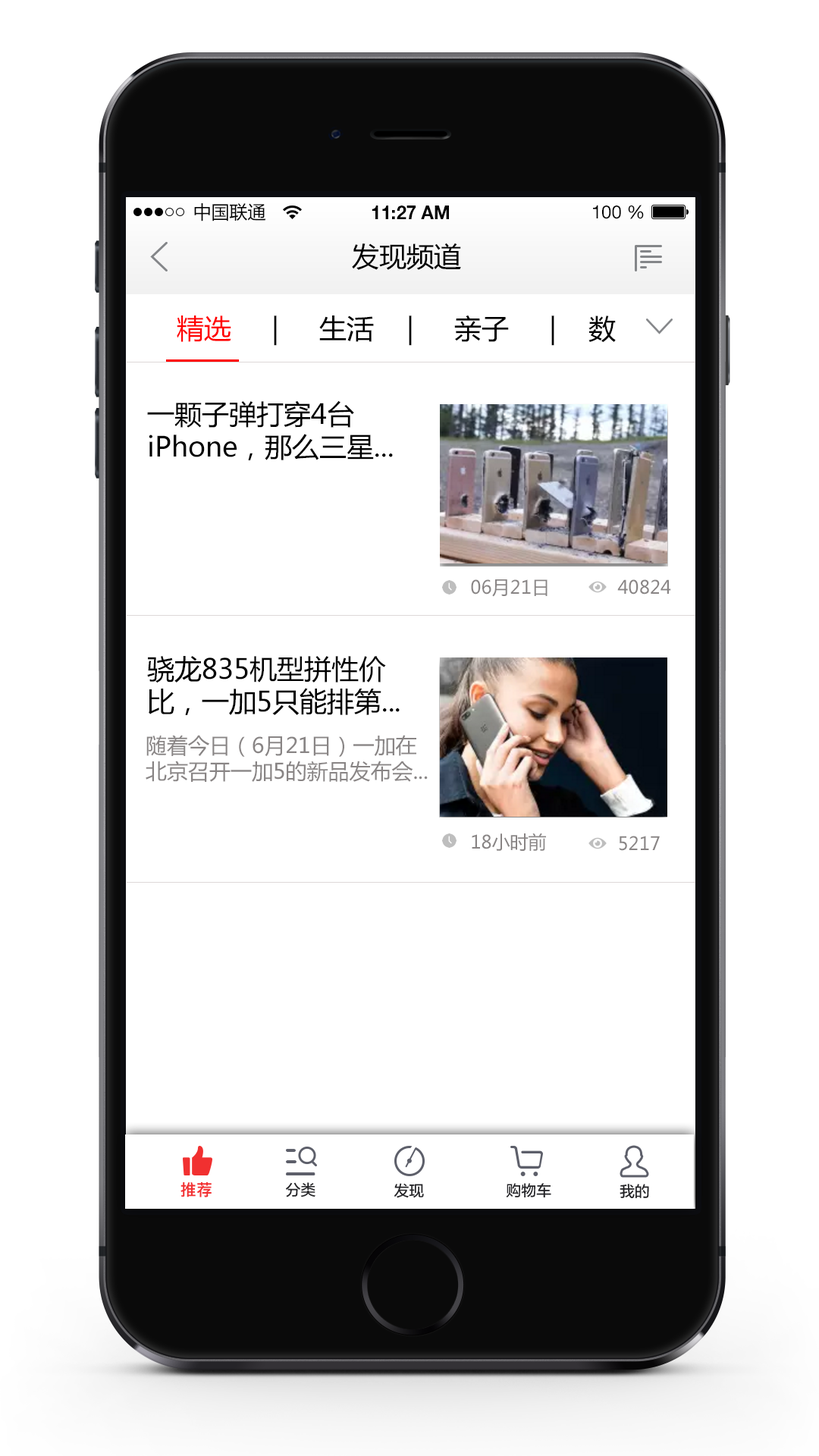
<style>
.page{position:relative;width:819px;height:1456px;background:#ffffff}
.page>*{position:absolute;margin:0}
.t1{font:18.2px "MicrosoftYaHei";color:#000000}
.t2{font:18.2px "HelveticaNeueLTStd-Bd";color:#000000}
.t3{font:18.2px "HelveticaNeueLTStd-Roman";color:#000000}
.t4{font:27.3px "MicrosoftYaHei";color:#000000}
.t5{font:27.3px "MicrosoftYaHei";color:#ff0000}
.t6{font:18.2px "MicrosoftYaHei";color:#898585}
.t7{font:21.2px "MicrosoftYaHei";color:#898585}
</style>
<div class="page">
<p class="t1" style="left:194px;top:203px;width:72px;height:18px">中国联通</p>
<p class="t2" style="left:372px;top:206px;width:77px;height:13px">11:27 AM</p>
<p class="t3" style="left:593px;top:205px;width:51px;height:14px">100 %</p>
<p class="t4" style="left:352px;top:243px;width:109px;height:27px">发现频道</p>
<p class="t4" style="left:177px;top:315px;width:439px;height:31px"><span class="t5">精选</span>     |     生活    |     亲子     |    数</p>
<p class="t4" style="left:147px;top:400px;width:246px;height:60px">一颗子弹打穿4台<br>iPhone，那么三星...</p>
<p class="t6" style="left:471px;top:579px;width:77px;height:18px">06月21日</p>
<p class="t6" style="left:617px;top:579px;width:54px;height:16px">40824</p>
<p class="t4" style="left:147px;top:656px;width:253px;height:59px">骁龙835机型拼性价<br>比，一加5只能排第...</p>
<p class="t7" style="left:146px;top:735px;width:282px;height:47px">随着今日（6月21日）一加在<br>北京召开一加5的新品发布会...</p>
<p class="t6" style="left:472px;top:833px;width:74px;height:18px">18小时前</p>
<p class="t6" style="left:619px;top:836px;width:41px;height:15px">5217</p>
</div>
